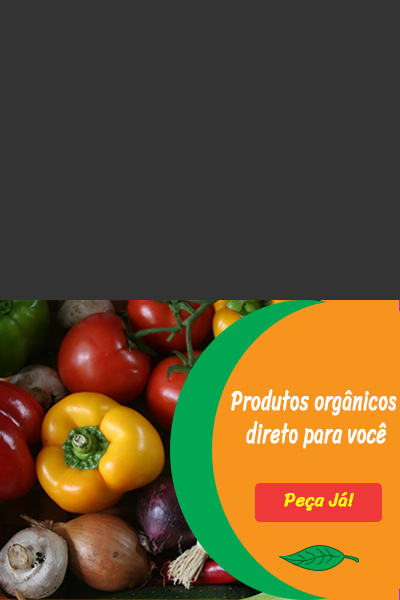
<style>
.page{position:relative;width:400px;height:600px;background:#333333}
.page>*{position:absolute;margin:0}
.t1{font:28px "Sriracha-Regular";color:#ffffff;font-weight:bold;scale:0.67 1}
.t2{font:18px "Sriracha-Regular";color:#ffff00;font-weight:bold}
</style>
<div class="page">
<p class="t1" style="left:231px;top:389px;width:166px;height:60px;text-align:center">Produtos orgânicos<br> direto para você</p>
<p class="t2" style="left:284px;top:492px;width:70px;height:19px">Peça Já!</p>
</div>
